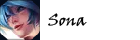
<style>
.page{position:relative;width:140px;height:40px;background:#ffffff}
.page>*{position:absolute;margin:0}
.t1{font:12px "VinerHandITC";color:#000000}
</style>
<div class="page">
<p class="t1" style="left:48px;top:13px;width:39px;height:14px">Sona</p>
</div>
